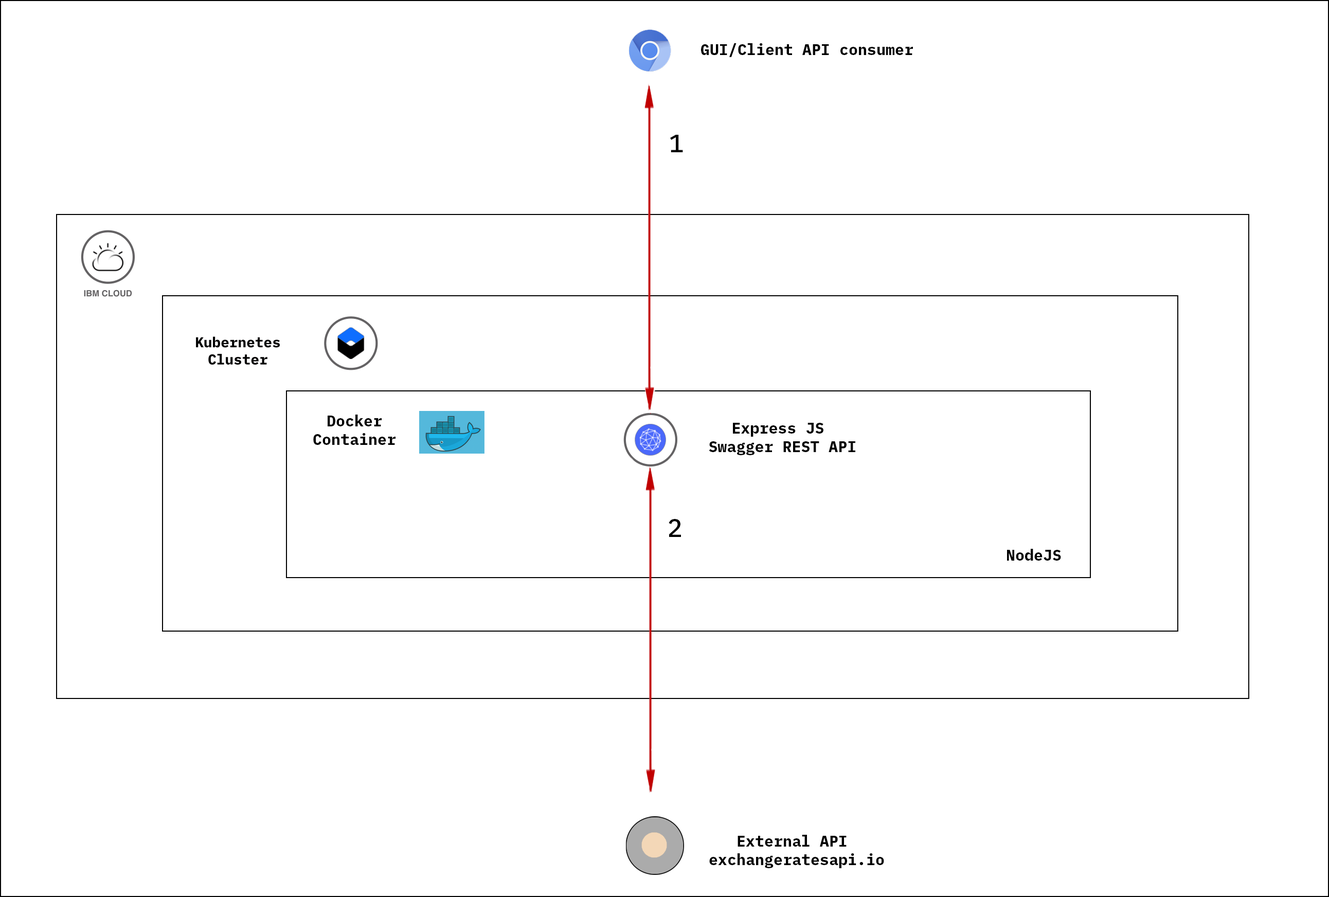
<style>
.page{position:relative;width:1329px;height:897px;background:#ffffff}
.page>*{position:absolute;margin:0}
.t1{font:15.4px "IBMPlexMono-Bold";color:#000000}
.t2{font:24.7px "IBMPlexMono-Medium";color:#000000}
</style>
<div class="page">
<p class="t1" style="left:701px;top:43px;width:212px;height:14px">GUI/Client API consumer</p>
<p class="t2" style="left:670px;top:135px;width:13px;height:17px">1</p>
<p class="t1" style="left:313px;top:415px;width:83px;height:30px;text-align:center">Docker<br>Container</p>
<p class="t1" style="left:709px;top:423px;width:146px;height:32px;text-align:center">Express JS <br>Swagger REST API</p>
<p class="t2" style="left:669px;top:519px;width:12px;height:18px">2</p>
<p class="t1" style="left:1007px;top:549px;width:54px;height:12px">NodeJS</p>
<p class="t1" style="left:709px;top:835px;width:175px;height:33px;text-align:center">External API <br>exchangeratesapi.io</p>
</div>
